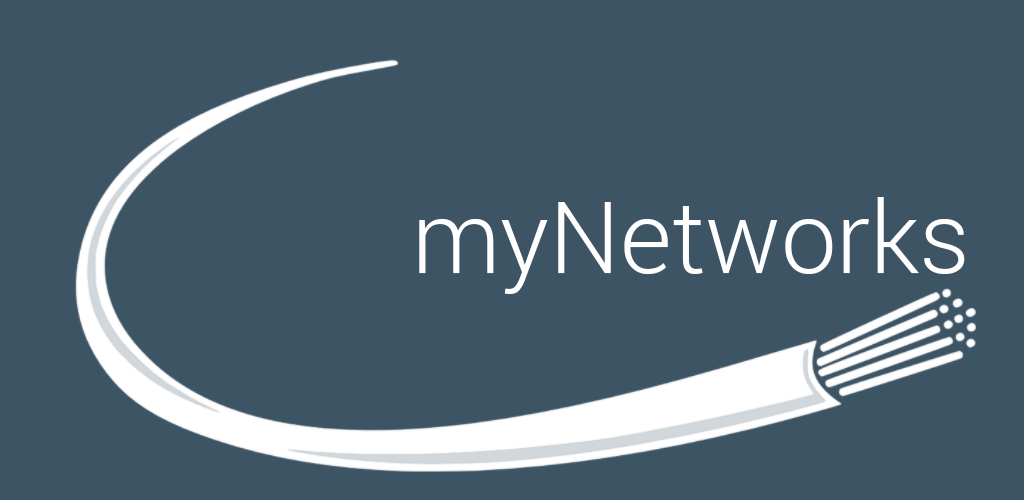
<style>
.page{position:relative;width:1024px;height:500px;background:#3d5465}
.page>*{position:absolute;margin:0}
.t1{font:100px "Roboto-Light";color:#ffffff}
</style>
<div class="page">
<p class="t1" style="left:419px;top:197px;width:546px;height:97px">myNetworks</p>
</div>
